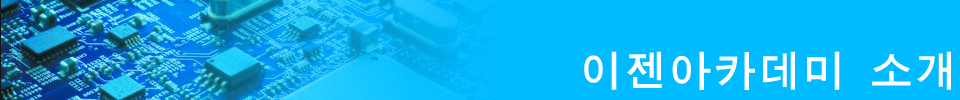
<style>
.page{position:relative;width:960px;height:100px;background:#00bbff}
.page>*{position:absolute;margin:0}
.t1{font:44.6px "MJemokGothic";color:#ffffff}
</style>
<div class="page">
<p class="t1" style="left:584px;top:51px;width:367px;height:39px">이젠아카데미 소개</p>
</div>
